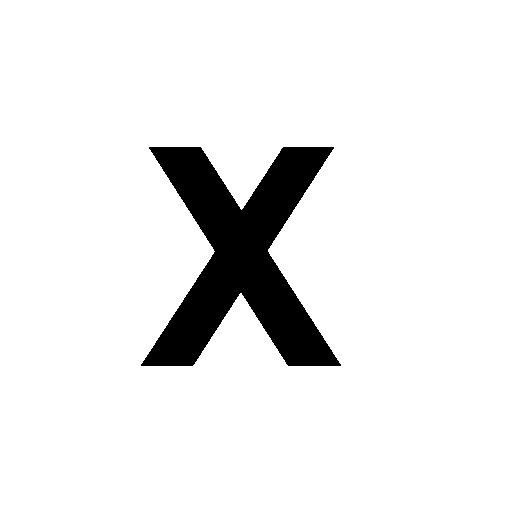
<style>
.page{position:relative;width:512px;height:512px;background:#ffffff}
.page>*{position:absolute;margin:0}
.t1{font:304.6px "Arial-BoldMT";letter-spacing:0.1em;color:#000000}
</style>
<div class="page">
<p class="t1" style="left:141px;top:147px;width:200px;height:219px">X</p>
</div>
